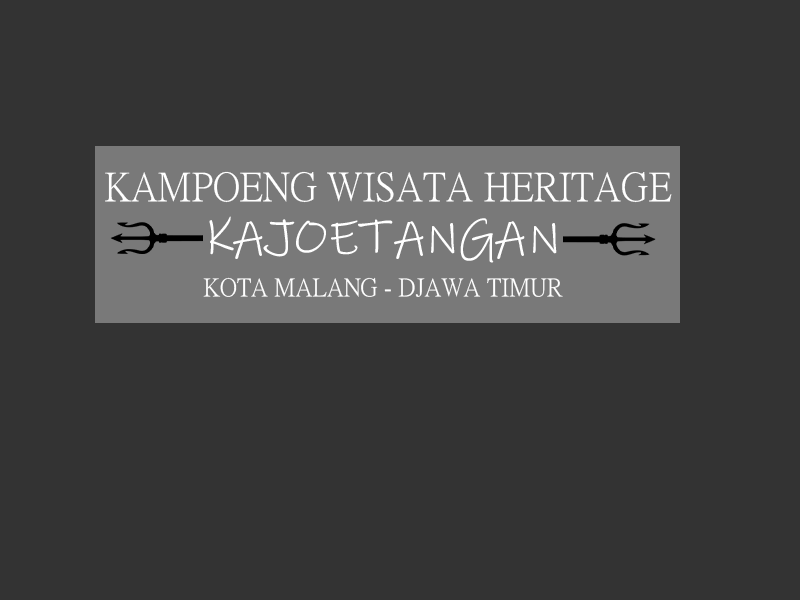
<style>
.page{position:relative;width:800px;height:600px;background:#333333}
.page>*{position:absolute;margin:0}
.t1{font:40px "PMingLiU-ExtB";color:#ffffff}
.t2{font:50px "InkFree";color:#ffffff}
.t3{font:25px "PMingLiU-ExtB";color:#ffffff}
</style>
<div class="page">
<p class="t1" style="left:105px;top:171px;width:567px;height:32px">KAMPOENG WISATA HERITAGE</p>
<p class="t2" style="left:209px;top:216px;width:348px;height:47px">KAJOETANGAN</p>
<p class="t3" style="left:203px;top:277px;width:360px;height:20px">KOTA MALANG - DJAWA TIMUR</p>
</div>
